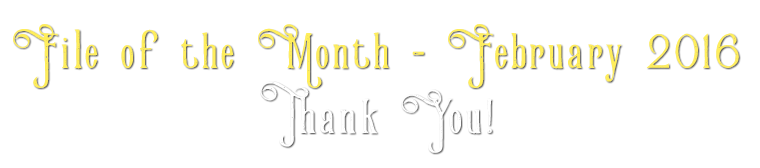
<style>
.page{position:relative;width:760px;height:168px;background:#ffffff}
.page>*{position:absolute;margin:0}
.t1{font:54.2px "VictorianParlorVintageAlternatefree";letter-spacing:0.08em;color:#ffee5c}
.t2{font:54.2px "VictorianParlorVintageAlternatefree";letter-spacing:0.08em;color:#ffffff}
</style>
<div class="page">
<p class="t1" style="left:13px;top:24px;width:726px;height:129px;text-align:center">File of the Month - February 2016<br><span class="t2">Thank You!</span></p>
</div>
